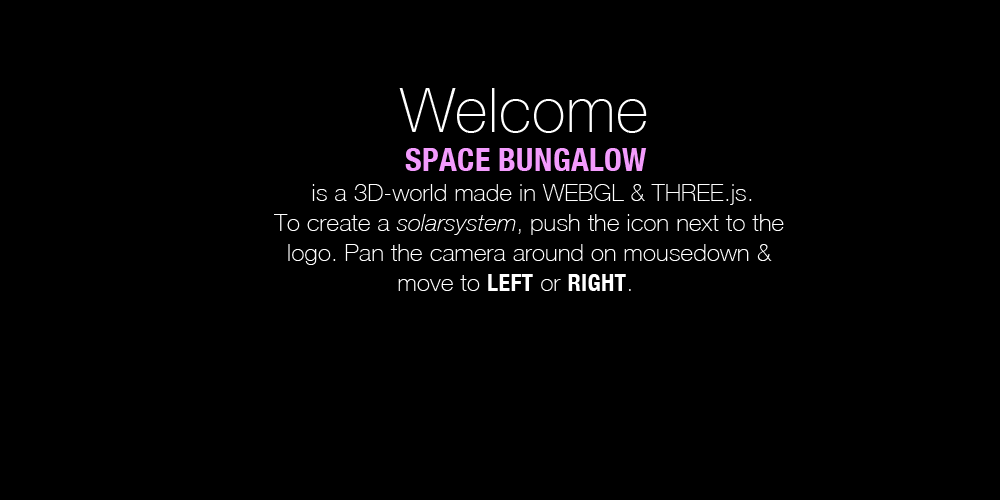
<style>
.page{position:relative;width:1000px;height:500px;background:#000000}
.page>*{position:absolute;margin:0}
.t1{font:62px "HelveticaNeue-Thin";letter-spacing:0.01em;color:#ffffff}
.t2{font:24px/30px "HelveticaNeue-Thin";letter-spacing:0.01em;color:#ffffff}
.t3{font:32px/30px "HelveticaNeue-CondensedBold";letter-spacing:0.01em;color:#f39bfd}
.t4{font:24px/30px "HelveticaNeue-ThinItalic";letter-spacing:0.01em;color:#ffffff}
.t5{font:24px/30px "HelveticaNeue-CondensedBold";letter-spacing:0.01em;color:#ffffff}
</style>
<div class="page">
<p class="t1" style="left:399px;top:88px;width:248px;height:45px">Welcome</p>
<p class="t2" style="left:274px;top:148px;width:510px;height:143px;text-align:center"><span class="t3">SPACE BUNGALOW <br></span>is a 3D-world made in WEBGL &amp; THREE.js.<br>To create a <span class="t4">solarsystem</span>, push the icon next to the <br>logo. Pan the camera around on mousedown &amp; <br>move to <span class="t5">LEFT</span> or <span class="t5">RIGHT</span>.</p>
</div>
